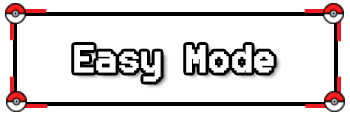
<style>
.page{position:relative;width:350px;height:120px;background:#ffffff}
.page>*{position:absolute;margin:0}
.t1{font:36px "Fixedsys";color:#ffffff;font-weight:bold}
</style>
<div class="page">
<p class="t1" style="left:74px;top:45px;width:200px;height:37px">Easy Mode</p>
</div>
